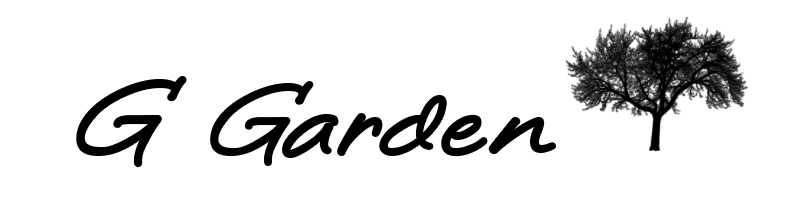
<style>
.page{position:relative;width:800px;height:200px;background:#ffffff}
.page>*{position:absolute;margin:0}
.t1{font:140px "LoosieScript";color:#000000}
.t2{font:24px "LoosieScript";color:#000000}
.t3{font:150px "LoosieScript";color:#000000}
</style>
<div class="page">
<p class="t1" style="left:78px;top:78px;width:477px;height:87px"><span class="t2"><br></span><span class="t3">G</span> Garden</p>
</div>
